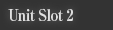
<style>
.page{position:relative;width:113px;height:30px;background:#333333}
.page>*{position:absolute;margin:0}
.t1{font:16px "RyuminPro-ExBold";letter-spacing:-0.04em;color:#dfdfdf;scale:0.9 1}
</style>
<div class="page">
<p class="t1" style="left:8px;top:8px;width:65px;height:13px">Unit Slot 2</p>
</div>
